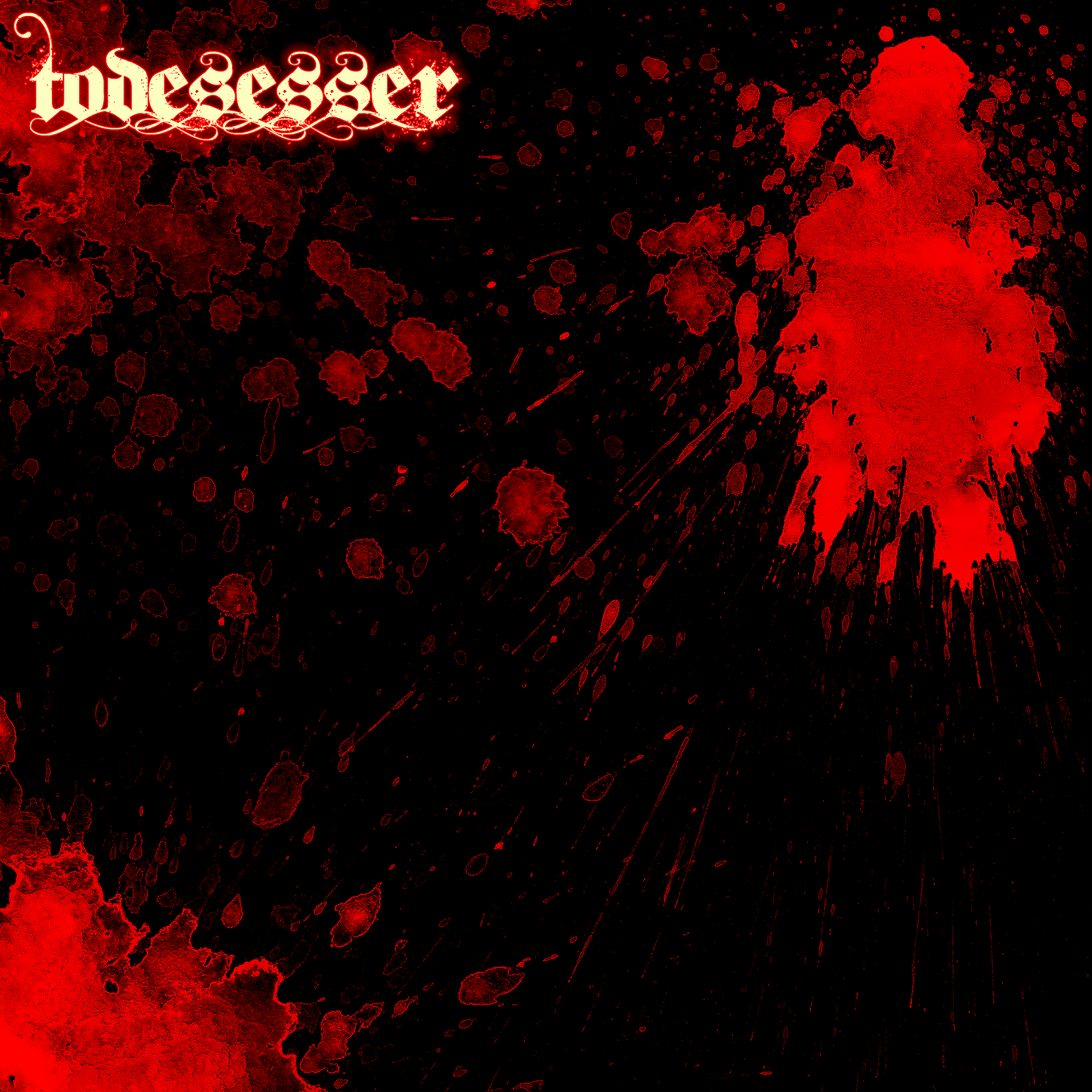
<style>
.page{position:relative;width:1092px;height:1092px;background:#000000}
.page>*{position:absolute;margin:0}
.t1{font:136.5px "Dirt2SoulStalker";color:#fdffc0}
</style>
<div class="page">
<p class="t1" style="left:14px;top:13px;width:448px;height:131px">Todesesser</p>
</div>
